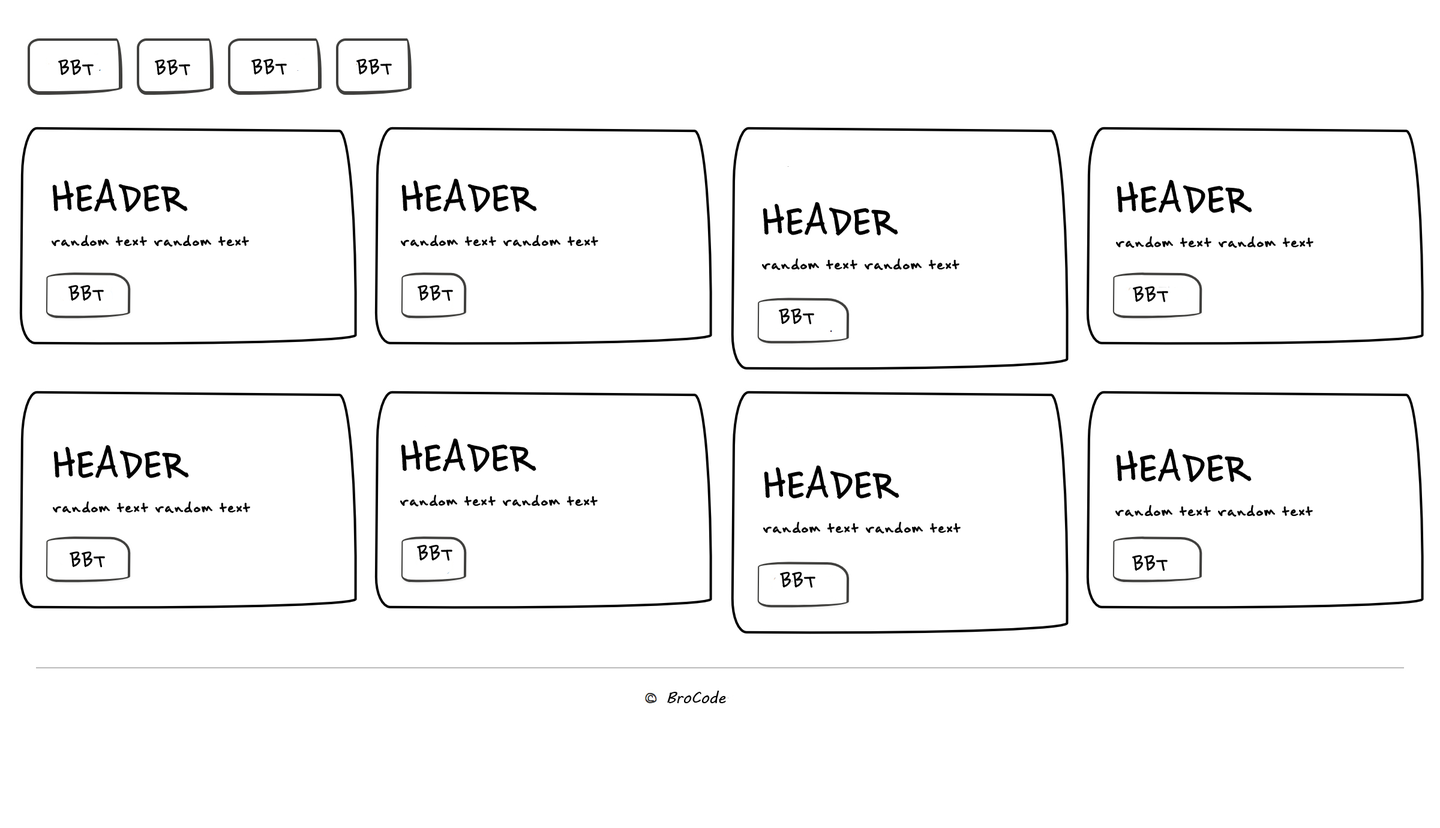
<style>
.page{position:relative;width:1440px;height:828px;background:#ffffff}
.page>*{position:absolute;margin:0}
.t1{font:25.3px "BrownBagLunch";color:#000000}
.t2{font:53.2px "BrownBagLunch";color:#000000}
</style>
<div class="page">
<p class="t1" style="left:58px;top:59px;width:36px;height:17px">BBT</p>
<p class="t1" style="left:155px;top:59px;width:35px;height:17px">BBT</p>
<p class="t1" style="left:251px;top:59px;width:36px;height:16px">BBT</p>
<p class="t1" style="left:356px;top:59px;width:36px;height:16px">BBT</p>
<p class="t2" style="left:52px;top:178px;width:136px;height:34px">HEADER</p>
<p class="t2" style="left:401px;top:178px;width:136px;height:34px">HEADER</p>
<p class="t2" style="left:1117px;top:179px;width:135px;height:35px">HEADER</p>
<p class="t2" style="left:763px;top:202px;width:135px;height:34px">HEADER</p>
<p class="t1" style="left:52px;top:235px;width:197px;height:12px">random text random text</p>
<p class="t1" style="left:401px;top:235px;width:197px;height:12px">random text random text</p>
<p class="t1" style="left:1116px;top:236px;width:197px;height:12px">random text random text</p>
<p class="t1" style="left:762px;top:258px;width:197px;height:12px">random text random text</p>
<p class="t1" style="left:68px;top:285px;width:36px;height:16px">BBT</p>
<p class="t1" style="left:418px;top:285px;width:35px;height:16px">BBT</p>
<p class="t1" style="left:1133px;top:286px;width:35px;height:16px">BBT</p>
<p class="t1" style="left:779px;top:308px;width:35px;height:17px">BBT</p>
<p class="t2" style="left:53px;top:445px;width:136px;height:34px">HEADER</p>
<p class="t2" style="left:401px;top:438px;width:135px;height:34px">HEADER</p>
<p class="t2" style="left:1116px;top:448px;width:136px;height:34px">HEADER</p>
<p class="t2" style="left:764px;top:465px;width:135px;height:34px">HEADER</p>
<p class="t1" style="left:400px;top:494px;width:198px;height:12px">random text random text</p>
<p class="t1" style="left:53px;top:501px;width:197px;height:12px">random text random text</p>
<p class="t1" style="left:1115px;top:505px;width:198px;height:12px">random text random text</p>
<p class="t1" style="left:763px;top:521px;width:198px;height:12px">random text random text</p>
<p class="t1" style="left:417px;top:545px;width:35px;height:16px">BBT</p>
<p class="t1" style="left:70px;top:551px;width:35px;height:17px">BBT</p>
<p class="t1" style="left:1132px;top:555px;width:36px;height:16px">BBT</p>
<p class="t1" style="left:780px;top:572px;width:35px;height:16px">BBT</p>
</div>
